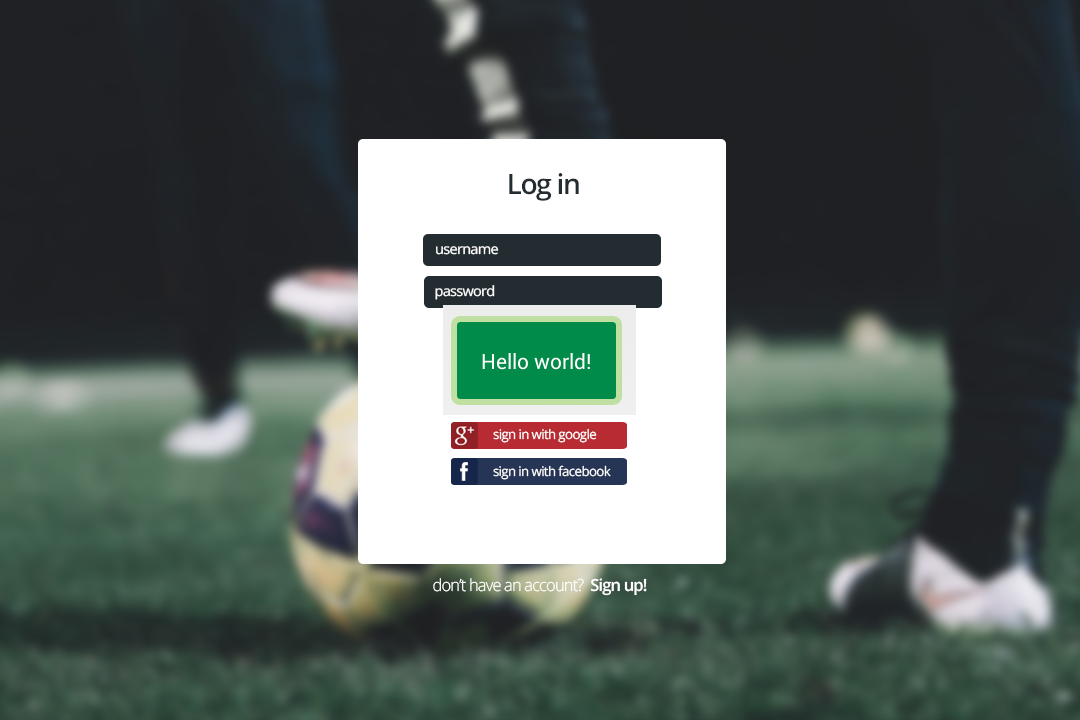
<style>
.page{position:relative;width:1080px;height:720px}
.page>*{position:absolute;margin:0}
.t1{font:28.1px "OpenSans-Semibold";letter-spacing:-0.05em;color:#232c31}
.t2{font:14px "OpenSans";letter-spacing:-0.05em;color:#ffffff;scale:1.03 1}
.t3{font:13.3px "OpenSans";letter-spacing:-0.05em;color:#ffffff}
.t4{font:16.8px "OpenSans-Light";letter-spacing:-0.05em;color:#ffffff}
.t5{font:16.8px "OpenSans-Semibold";letter-spacing:-0.05em;color:#ffffff}
</style>
<div class="page">
<p class="t1" style="left:509px;top:173px;width:70px;height:28px">Log in</p>
<p class="t2" style="left:436px;top:246px;width:63px;height:9px">username</p>
<p class="t2" style="left:435px;top:285px;width:60px;height:15px">password</p>
<p class="t3" style="left:493px;top:428px;width:104px;height:15px">sign in with google</p>
<p class="t3" style="left:493px;top:465px;width:118px;height:15px">sign in with facebook</p>
<p class="t4" style="left:433px;top:578px;width:214px;height:18px">don’t have an account?  <span class="t5">Sign up!</span></p>
</div>
